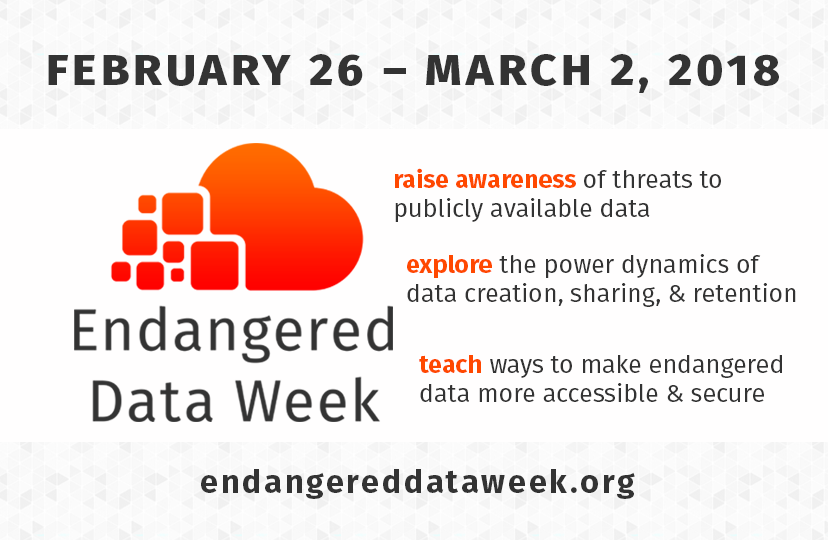
<style>
.page{position:relative;width:828px;height:540px;background:#fffefe}
.page>*{position:absolute;margin:0}
.t1{font:44px "FiraSans-ExtraBold";letter-spacing:0.09em;color:#333333;scale:1.05 1}
.t2{font:32px "FiraSans-Bold";letter-spacing:0.09em;color:#010000;scale:1.05 1}
.t3{font:24px "FiraSans-Regular";color:#333333;scale:1.05 1}
.t4{font:24px "FiraSans-Bold";color:#ff4800;scale:1.05 1}
.t5{font:21.8px "FiraSans-Regular";color:#ff4800;scale:1.05 1}
.t6{font:21.8px "FiraSans-Regular";color:#333333;scale:1.05 1}
.t7{font:32px "FiraSans-Bold";letter-spacing:0.09em;color:#333333}
</style>
<div class="page">
<p class="t1" style="left:48px;top:54px;width:731px;height:39px"><span class="t2"><br> <br></span>FEBRUARY 26 – MARCH 2, 2018</p>
<p class="t3" style="left:395px;top:168px;width:326px;height:54px"><span class="t4">raise awareness </span>of threats to<br>publicly available data <br><span class="t5"></span></p>
<p class="t3" style="left:407px;top:254px;width:389px;height:53px"><span class="t4">explore </span>the power dynamics of data creation, sharing, &amp; retention</p>
<p class="t3" style="left:419px;top:355px;width:363px;height:47px"><span class="t6"><br></span><span class="t5"><br></span><span class="t4">teach </span>ways to make endangered data more accessible &amp; secure</p>
<p class="t7" style="left:201px;top:469px;width:434px;height:30px">endangereddataweek.org</p>
</div>
